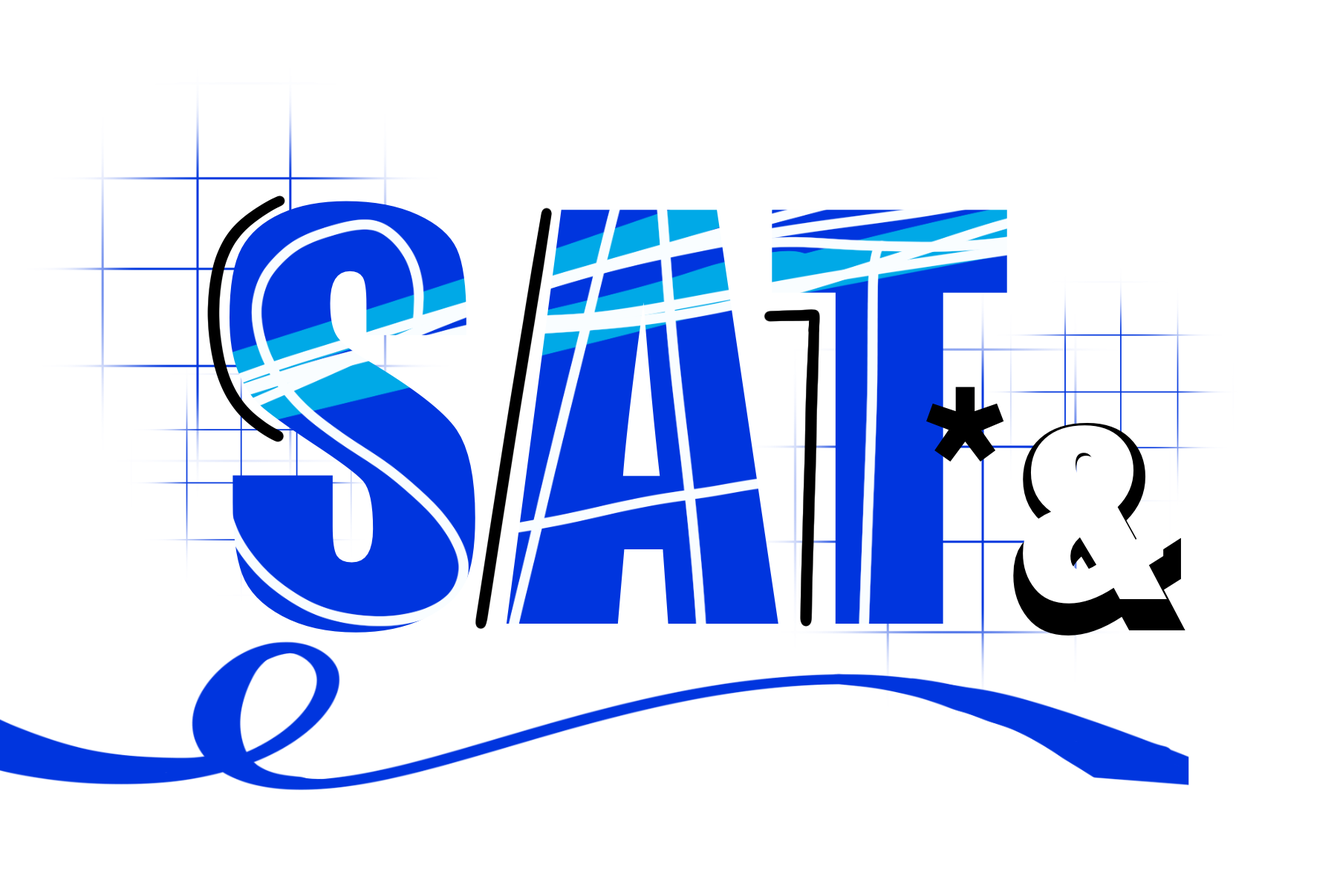
<style>
.page{position:relative;width:1337px;height:892px;background:#ffffff}
.page>*{position:absolute;margin:0}
.t1{font:523.3px "Impact";color:#0035de}
.t2{font:307.7px "Impact"}
</style>
<div class="page">
<p class="t1" style="left:0px;top:0px;width:1337px;height:892px;text-align:center">SAT</p>
<p class="t2" style="left:0px;top:0px;width:1337px;height:892px;text-align:center">*&amp;</p>
</div>
